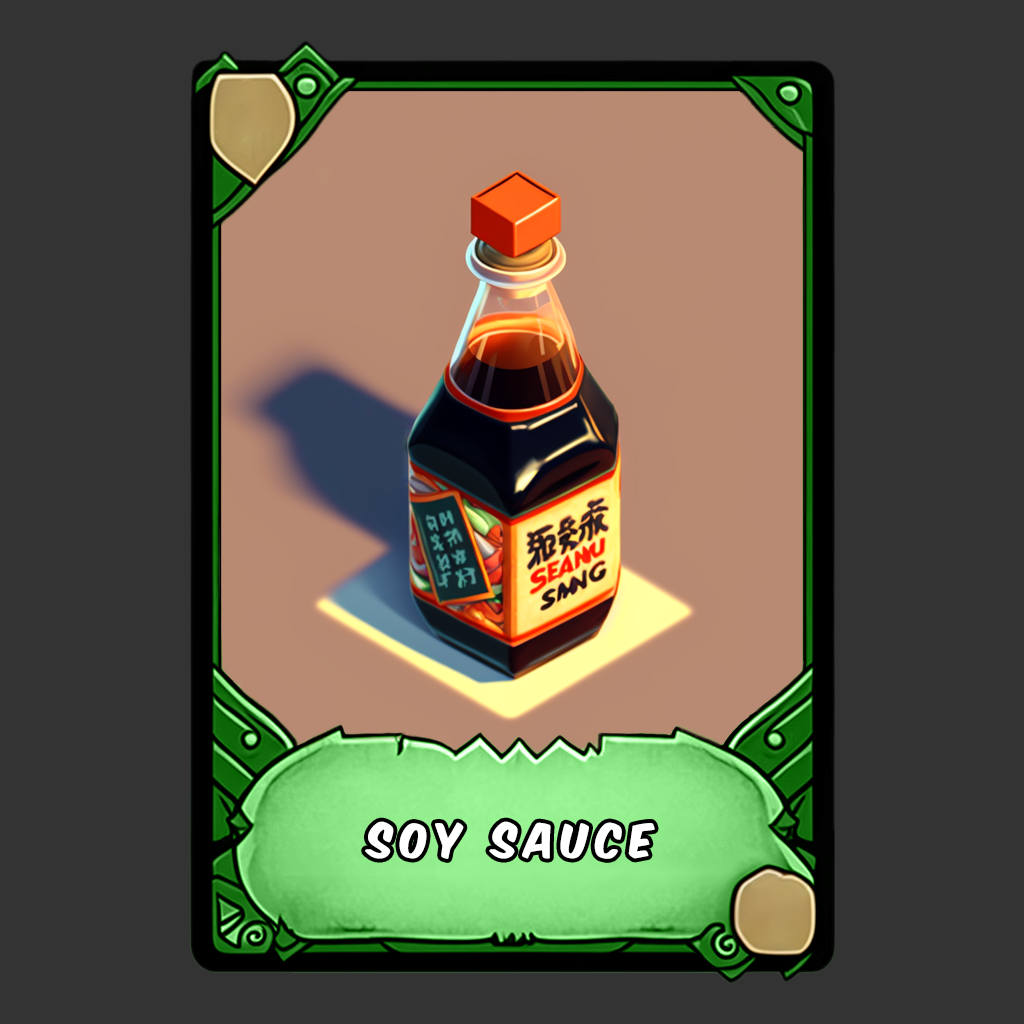
<style>
.page{position:relative;width:1024px;height:1024px;background:#333333}
.page>*{position:absolute;margin:0}
.t1{font:40px "KomikaAxis";letter-spacing:0.2em;color:#ffffff}
</style>
<div class="page">
<p class="t1" style="left:365px;top:821px;width:290px;height:38px">soy sauce</p>
</div>
